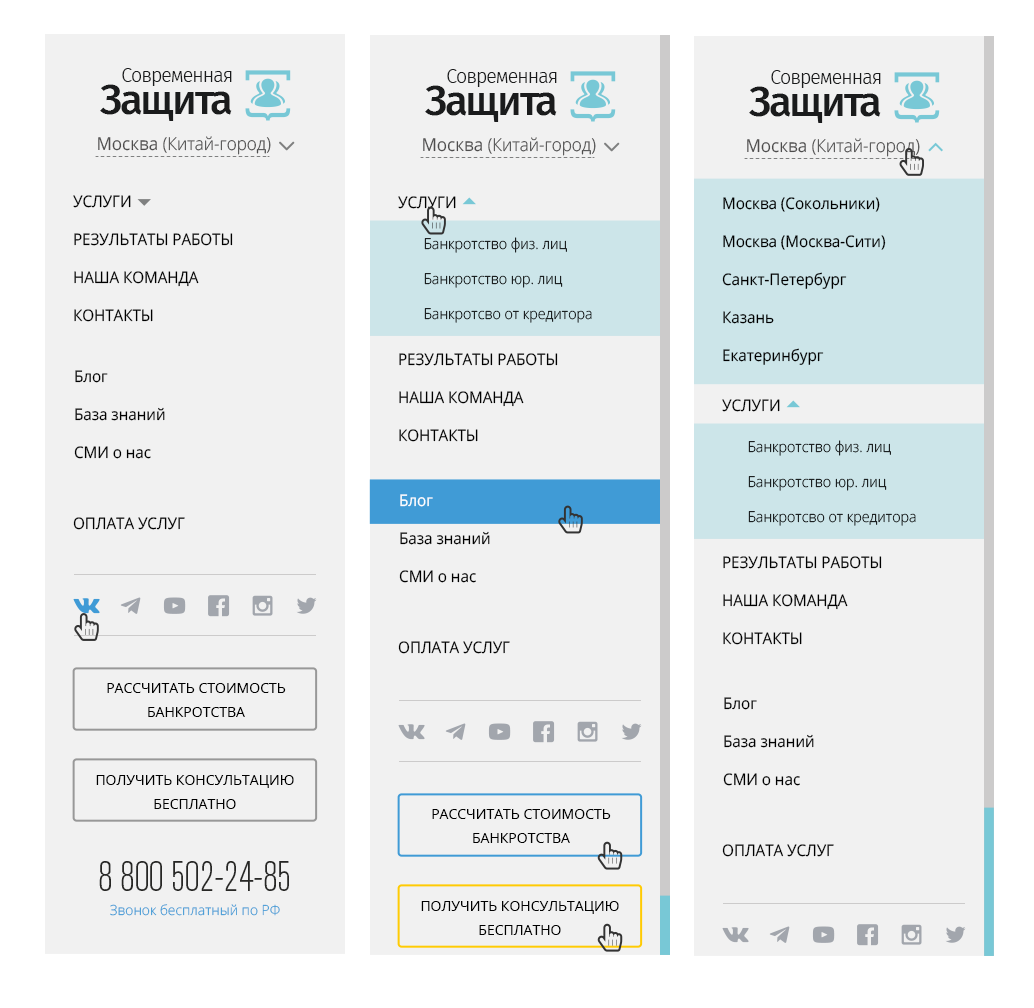
<style>
.page{position:relative;width:1034px;height:1008px;background:#f1f1f1}
.page>*{position:absolute;margin:0}
.t1{font:19.8px "FiraSans-Light";letter-spacing:-0.05em;color:#1a1b1c}
.t2{font:42.4px "FiraSans-Medium";letter-spacing:-0.05em;color:#1a1b1c}
.t3{font:18px "OpenSans-Light";color:#4e4d4d;scale:0.95 1}
.t4{font:18px "OpenSans";color:#4e4d4d;scale:0.95 1}
.t5{font:16px/38px "OpenSans";color:#000000;text-transform:uppercase;scale:0.95 1}
.t6{font:16px "OpenSans";color:#000000;text-transform:uppercase;scale:0.95 1}
.t7{font:16px/38px "OpenSans";color:#000000;scale:0.95 1}
.t8{font:15px/35px "OpenSans-Light";scale:0.95 1}
.t9{font:16px/38px "OpenSans";color:#ffffff;scale:0.95 1}
.t10{font:14px/24px "OpenSans";color:#000000;text-transform:uppercase}
.t11{font:41.2px "AkzidenzGroteskPro-LightCn";color:#272725}
.t12{font:14px "OpenSans-Light";color:#409bd6}
</style>
<div class="page">
<p class="t1" style="left:122px;top:68px;width:110px;height:18px">Современная</p>
<p class="t1" style="left:447px;top:69px;width:110px;height:18px">Современная</p>
<p class="t1" style="left:771px;top:70px;width:110px;height:18px">Современная</p>
<p class="t2" style="left:100px;top:84px;width:132px;height:37px">Защита</p>
<p class="t2" style="left:425px;top:85px;width:132px;height:37px">Защита</p>
<p class="t2" style="left:749px;top:86px;width:132px;height:37px">Защита</p>
<p class="t3" style="left:98px;top:136px;width:173px;height:19px"><span class="t4">Москва </span>(Китай-город)</p>
<p class="t3" style="left:423px;top:137px;width:173px;height:19px"><span class="t4">Москва </span>(Китай-город)</p>
<p class="t3" style="left:747px;top:138px;width:173px;height:19px"><span class="t4">Москва </span>(Китай-город)</p>
<p class="t5" style="left:73px;top:195px;width:160px;height:127px">Услуги<br>Результаты работы<br>Наша команда<br>Контакты</p>
<p class="t6" style="left:398px;top:196px;width:58px;height:13px">Услуги</p>
<p class="t7" style="left:722px;top:197px;width:164px;height:168px">Москва (Сокольники)<br>Москва (Москва-Сити)<br>Санкт-Петербург<br>Казань<br>Екатеринбург</p>
<p class="t8" style="left:424px;top:237px;width:168px;height:86px">Банкротство физ. лиц<br>Банкротство юр. лиц<br>Банкротсво от кредитора</p>
<p class="t5" style="left:399px;top:353px;width:159px;height:89px">Результаты работы<br>Наша команда<br>Контакты</p>
<p class="t7" style="left:74px;top:370px;width:91px;height:89px">Блог<br>База знаний<br>СМИ о нас</p>
<p class="t6" style="left:722px;top:399px;width:58px;height:13px">Услуги</p>
<p class="t8" style="left:748px;top:440px;width:168px;height:86px">Банкротство физ. лиц<br>Банкротство юр. лиц<br>Банкротсво от кредитора</p>
<p class="t7" style="left:399px;top:494px;width:91px;height:89px"><span class="t9">Блог<br></span>База знаний<br>СМИ о нас</p>
<p class="t6" style="left:73px;top:517px;width:112px;height:13px">Оплата услуг</p>
<p class="t5" style="left:723px;top:556px;width:159px;height:89px">Результаты работы<br>Наша команда<br>Контакты</p>
<p class="t6" style="left:398px;top:641px;width:112px;height:13px">Оплата услуг</p>
<p class="t10" style="left:107px;top:683px;width:179px;height:34px;text-align:center">Рассчитать стоимость<br>банкротства</p>
<p class="t7" style="left:723px;top:697px;width:91px;height:89px">Блог<br>База знаний<br>СМИ о нас</p>
<p class="t10" style="left:96px;top:775px;width:198px;height:34px;text-align:center">получить консультацию<br>бесплатно</p>
<p class="t10" style="left:432px;top:809px;width:179px;height:34px;text-align:center">Рассчитать стоимость<br>банкротства</p>
<p class="t6" style="left:722px;top:844px;width:112px;height:13px">Оплата услуг</p>
<p class="t11" style="left:99px;top:861px;width:190px;height:30px">8 800 502-24-85</p>
<p class="t12" style="left:110px;top:904px;width:170px;height:12px">Звонок бесплатный по РФ</p>
<p class="t10" style="left:421px;top:901px;width:198px;height:34px;text-align:center">получить консультацию<br>бесплатно</p>
</div>
